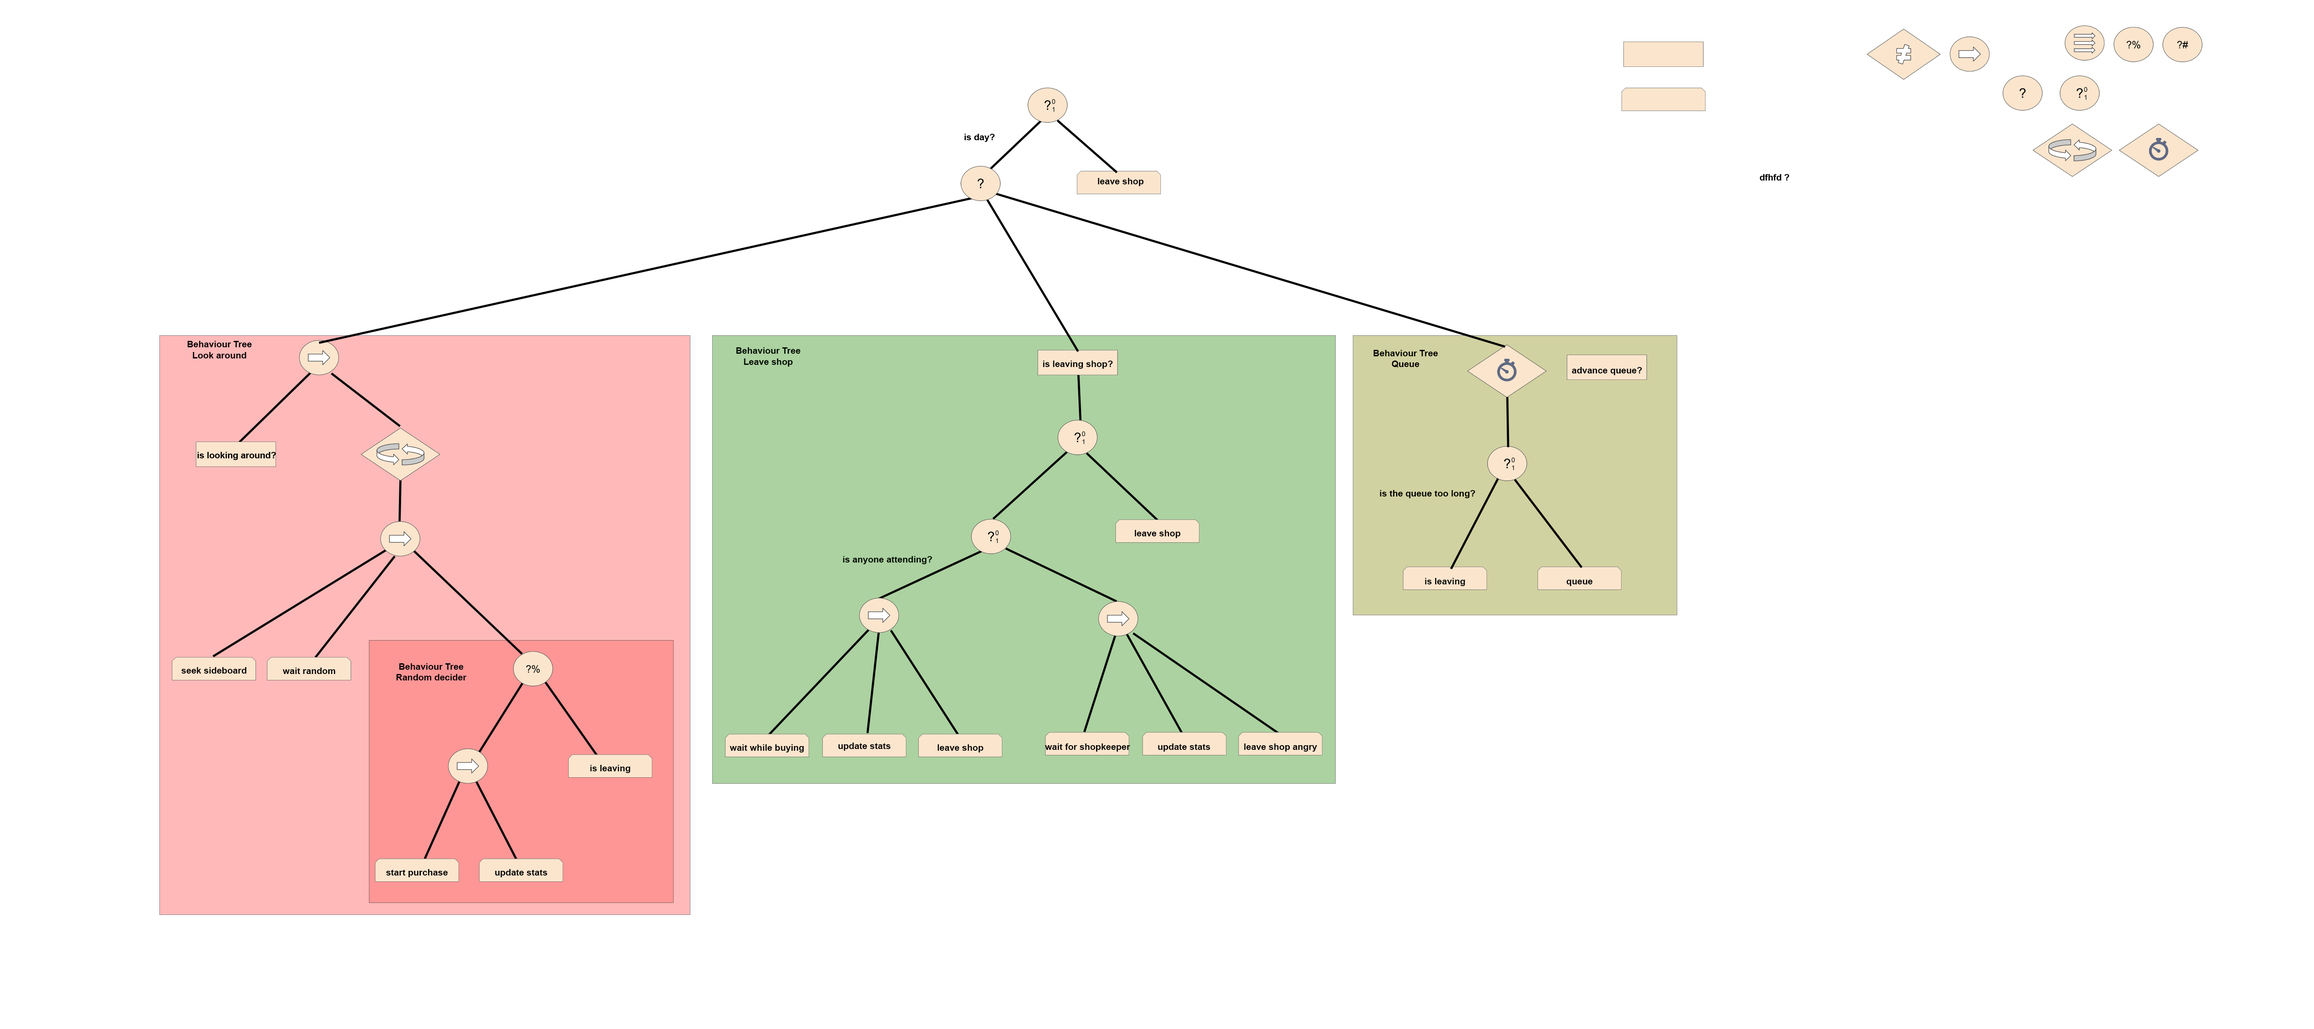
<style>
.page{position:relative;width:2314px;height:1029px;background:#ffffff}
.page>*{position:absolute;margin:0}
.t1{font:9px "Arial-BoldMT";color:#000000}
.t2{font:8.9px "Arial-BoldMT";color:#000000}
.t3{font:6.5px "ArialMT";color:#000000}
.t4{font:9px "Arial-BoldMT";color:#010901}
</style>
<div class="page">
<p class="t1" style="left:965px;top:134px;width:30px;height:8px">is day?</p>
<p class="t2" style="left:1760px;top:174px;width:30px;height:6px"><span class="t3"><br></span>dfhfd ?</p>
<p class="t1" style="left:1098px;top:178px;width:46px;height:8px">leave shop</p>
<p class="t1" style="left:187px;top:341px;width:65px;height:17px;text-align:center">Behaviour Tree<br>Look around</p>
<p class="t4" style="left:736px;top:347px;width:65px;height:19px;text-align:center">Behaviour Tree<br>Leave shop</p>
<p class="t1" style="left:1374px;top:350px;width:64px;height:17px;text-align:center">Behaviour Tree<br>Queue</p>
<p class="t1" style="left:1043px;top:360px;width:70px;height:9px">is leaving shop?</p>
<p class="t1" style="left:1572px;top:367px;width:70px;height:8px">advance queue?</p>
<p class="t1" style="left:1380px;top:490px;width:96px;height:8px">is the queue too long?</p>
<p class="t1" style="left:1135px;top:530px;width:46px;height:8px">leave shop</p>
<p class="t4" style="left:843px;top:556px;width:89px;height:8px">is anyone attending?</p>
<p class="t4" style="left:1425px;top:578px;width:40px;height:8px">is leaving</p>
<p class="t1" style="left:1567px;top:579px;width:26px;height:7px">queue</p>
<p class="t1" style="left:396px;top:663px;width:71px;height:17px;text-align:center">Behaviour Tree<br>Random decider</p>
<p class="t1" style="left:181px;top:667px;width:65px;height:6px">seek sideboard</p>
<p class="t1" style="left:282px;top:667px;width:54px;height:7px">wait random</p>
<p class="t1" style="left:730px;top:744px;width:74px;height:8px">wait while buying</p>
<p class="t1" style="left:838px;top:742px;width:53px;height:8px">update stats</p>
<p class="t1" style="left:938px;top:744px;width:46px;height:8px">leave shop</p>
<p class="t1" style="left:1045px;top:743px;width:86px;height:8px">wait for shopkeeper</p>
<p class="t1" style="left:1158px;top:743px;width:52px;height:8px">update stats</p>
<p class="t1" style="left:1244px;top:743px;width:73px;height:8px">leave shop angry</p>
<p class="t1" style="left:590px;top:765px;width:40px;height:8px">is leaving</p>
<p class="t1" style="left:386px;top:869px;width:62px;height:8px">start purchase</p>
<p class="t1" style="left:495px;top:869px;width:52px;height:8px">update stats</p>
</div>
